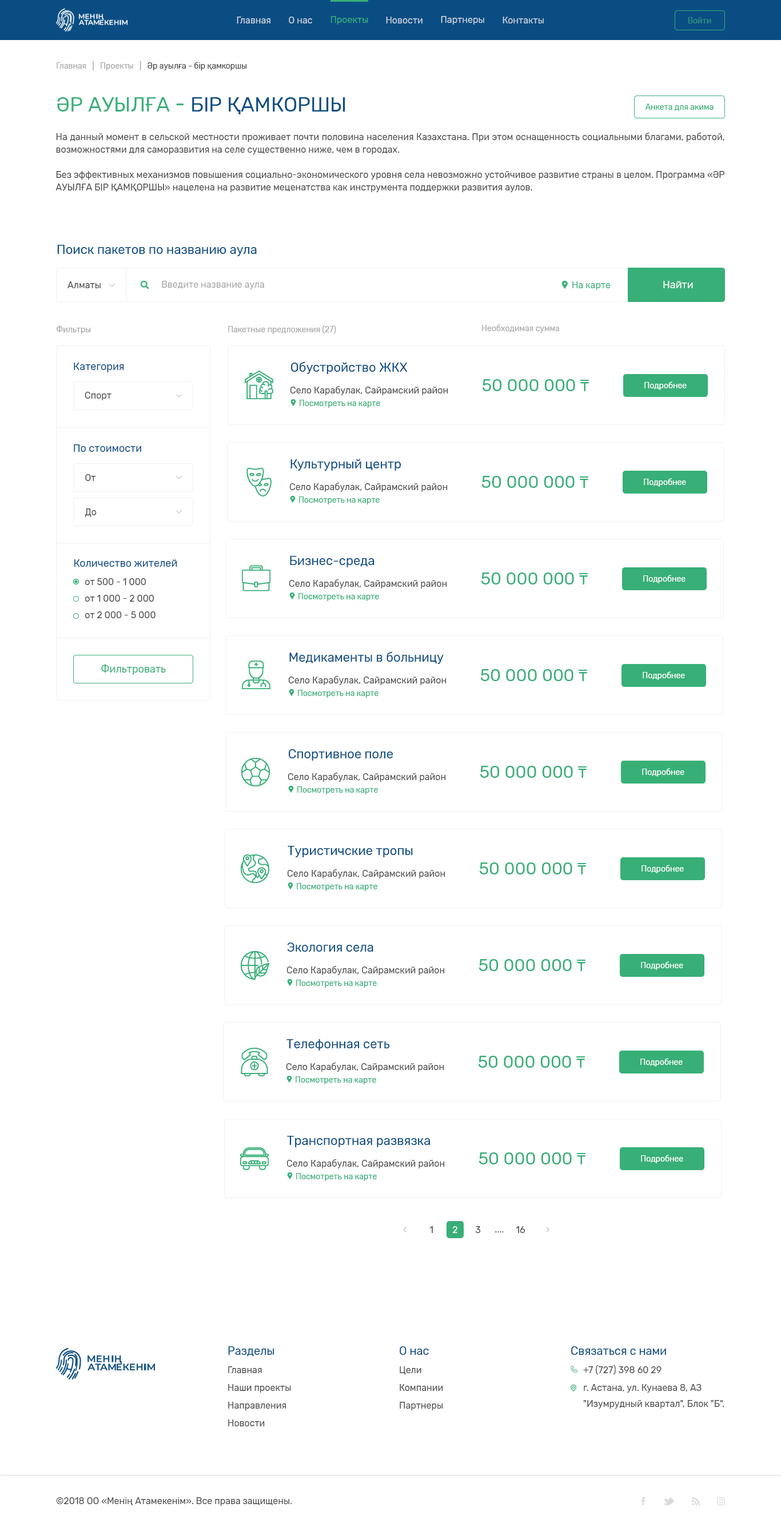
<style>
.page{position:relative;width:781px;height:1527px;background:#ffffff}
.page>*{position:absolute;margin:0}
.t1{font:9.1px "Rubik-Regular";color:#ccd4df}
.t2{font:9.1px "Rubik-Regular";color:#37af77}
.t3{font:8px "Rubik-Regular";color:#2c967b}
.t4{font:8px "Rubik-Regular";color:#a8a8a8}
.t5{font:8px "Rubik-Regular";color:#4a4a4a}
.t6{font:20.6px "Rubik-Regular";color:#0a4d83;text-transform:uppercase}
.t7{font:20.6px "Rubik-Regular";color:#37af77;text-transform:uppercase}
.t8{font:8px "Rubik-Regular";color:#37af77}
.t9{font:9.1px/12.6px "Rubik-Regular";color:#4a4a4a}
.t10{font:12.6px "Rubik-Regular";color:#0a4d83}
.t11{font:9.1px "Rubik-Regular";color:#4a4a4a}
.t12{font:9.1px "Rubik-Regular";color:#a8a8a8}
.t13{font:10.3px "Rubik-Regular";color:#fefefe}
.t14{font:10.3px "Rubik-Regular";color:#0a4d83}
.t15{font:17.2px "Rubik-Regular";color:#37af77}
.t16{font:8px "Rubik-Regular";color:#ffffff}
.t17{font:10.3px "Rubik-Regular";color:#37af77}
.t18{font:9.1px "Rubik-Regular";color:#ffffff}
.t19{font:11.4px "Rubik-Regular";color:#0a4d83}
.t20{font:9.1px/16px "Rubik-Regular";color:#4a4a4a}
</style>
<div class="page">
<p class="t1" style="left:237px;top:17px;width:33px;height:6px">Главная</p>
<p class="t1" style="left:289px;top:17px;width:23px;height:6px">О нас</p>
<p class="t2" style="left:330px;top:16px;width:38px;height:9px">Проекты</p>
<p class="t1" style="left:386px;top:17px;width:37px;height:6px">Новости</p>
<p class="t1" style="left:441px;top:16px;width:43px;height:9px">Партнеры</p>
<p class="t1" style="left:503px;top:17px;width:41px;height:6px">Контакты</p>
<p class="t3" style="left:688px;top:17px;width:23px;height:6px">Войти</p>
<p class="t4" style="left:57px;top:61px;width:190px;height:9px">Главная   |   Проекты   |   <span class="t5">Әр ауылға - бiр қамкоршы</span></p>
<p class="t6" style="left:57px;top:97px;width:288px;height:17px"><span class="t7">Әр ауылға - </span>бiр қамкоршы</p>
<p class="t8" style="left:645px;top:103px;width:69px;height:8px">Анкета для акима</p>
<p class="t9" style="left:55px;top:132px;width:669px;height:60px;text-align:justify">На данный момент в сельской местности проживает почти половина населения Казахстана. При этом оснащенность социальными благами, работой, возможностями для саморазвития на селе существенно ниже, чем в городах. <br><br>Без эффективных механизмов повышения социально-экономического уровня села невозможно устойчивое развитие страны в целом. Программа «ӘР АУЫЛҒА БІР ҚАМҚОРШЫ» нацелена на развитие меценатства как инструмента поддержки развития аулов.</p>
<p class="t10" style="left:57px;top:245px;width:200px;height:11px">Поиск пакетов по названию аула</p>
<p class="t11" style="left:67px;top:281px;width:34px;height:7px">Алматы</p>
<p class="t12" style="left:162px;top:281px;width:102px;height:8px">Введите название аула</p>
<p class="t2" style="left:572px;top:281px;width:39px;height:9px">На карте</p>
<p class="t13" style="left:663px;top:281px;width:30px;height:7px">Найти</p>
<p class="t4" style="left:57px;top:325px;width:34px;height:9px">Фильтры</p>
<p class="t4" style="left:228px;top:325px;width:108px;height:9px">Пакетные предложения (27)</p>
<p class="t4" style="left:482px;top:324px;width:77px;height:9px">Необходимая сумма</p>
<p class="t14" style="left:74px;top:363px;width:50px;height:9px">Категория</p>
<p class="t10" style="left:291px;top:361px;width:117px;height:13px">Обустройство ЖКХ</p>
<p class="t11" style="left:290px;top:385px;width:158px;height:10px">Село Карабулак, Сайрамский район</p>
<p class="t15" style="left:482px;top:379px;width:107px;height:12px">50 000 000 т</p>
<p class="t16" style="left:644px;top:381px;width:43px;height:9px">Подробнее</p>
<p class="t11" style="left:85px;top:392px;width:26px;height:8px">Спорт</p>
<p class="t8" style="left:300px;top:400px;width:80px;height:8px">Посмотреть на карте</p>
<p class="t14" style="left:74px;top:444px;width:67px;height:8px">По стоимости</p>
<p class="t10" style="left:290px;top:459px;width:111px;height:12px">Культурный центр</p>
<p class="t11" style="left:85px;top:474px;width:11px;height:7px">От</p>
<p class="t11" style="left:289px;top:482px;width:159px;height:10px">Село Карабулак, Сайрамский район</p>
<p class="t15" style="left:481px;top:476px;width:107px;height:12px">50 000 000 т</p>
<p class="t16" style="left:644px;top:478px;width:42px;height:9px">Подробнее</p>
<p class="t8" style="left:299px;top:496px;width:81px;height:8px">Посмотреть на карте</p>
<p class="t11" style="left:85px;top:508px;width:12px;height:9px">До</p>
<p class="t10" style="left:290px;top:556px;width:85px;height:11px">Бизнес-среда</p>
<p class="t14" style="left:74px;top:559px;width:103px;height:8px">Количество жителей</p>
<p class="t11" style="left:85px;top:578px;width:61px;height:7px">от 500 - 1 000</p>
<p class="t11" style="left:289px;top:579px;width:158px;height:9px">Село Карабулак, Сайрамский район</p>
<p class="t15" style="left:481px;top:572px;width:107px;height:12px">50 000 000 т</p>
<p class="t16" style="left:643px;top:575px;width:43px;height:8px">Подробнее</p>
<p class="t8" style="left:298px;top:593px;width:81px;height:8px">Посмотреть на карте</p>
<p class="t11" style="left:85px;top:595px;width:69px;height:7px">от 1 000 - 2 000</p>
<p class="t11" style="left:85px;top:611px;width:71px;height:7px">от 2 000 - 5 000</p>
<p class="t10" style="left:289px;top:651px;width:155px;height:13px">Медикаменты в больницу</p>
<p class="t17" style="left:101px;top:664px;width:65px;height:11px">Фильтровать</p>
<p class="t11" style="left:288px;top:675px;width:159px;height:10px">Село Карабулак, Сайрамский район</p>
<p class="t15" style="left:480px;top:669px;width:107px;height:12px">50 000 000 т</p>
<p class="t16" style="left:643px;top:671px;width:42px;height:9px">Подробнее</p>
<p class="t8" style="left:298px;top:690px;width:81px;height:8px">Посмотреть на карте</p>
<p class="t10" style="left:289px;top:749px;width:104px;height:11px">Спортивное поле</p>
<p class="t11" style="left:288px;top:772px;width:158px;height:10px">Село Карабулак, Сайрамский район</p>
<p class="t15" style="left:480px;top:766px;width:107px;height:12px">50 000 000 т</p>
<p class="t16" style="left:642px;top:768px;width:42px;height:8px">Подробнее</p>
<p class="t8" style="left:297px;top:786px;width:81px;height:8px">Посмотреть на карте</p>
<p class="t10" style="left:288px;top:846px;width:125px;height:11px">Туристичские тропы</p>
<p class="t11" style="left:287px;top:869px;width:158px;height:9px">Село Карабулак, Сайрамский район</p>
<p class="t15" style="left:479px;top:862px;width:107px;height:12px">50 000 000 т</p>
<p class="t16" style="left:642px;top:865px;width:42px;height:8px">Подробнее</p>
<p class="t8" style="left:297px;top:883px;width:80px;height:8px">Посмотреть на карте</p>
<p class="t10" style="left:287px;top:942px;width:86px;height:9px">Экология села</p>
<p class="t11" style="left:286px;top:965px;width:159px;height:10px">Село Карабулак, Сайрамский район</p>
<p class="t15" style="left:479px;top:959px;width:107px;height:12px">50 000 000 т</p>
<p class="t16" style="left:641px;top:961px;width:42px;height:9px">Подробнее</p>
<p class="t8" style="left:296px;top:979px;width:81px;height:8px">Посмотреть на карте</p>
<p class="t10" style="left:286px;top:1039px;width:104px;height:11px">Телефонная сеть</p>
<p class="t11" style="left:286px;top:1062px;width:158px;height:10px">Село Карабулак, Сайрамский район</p>
<p class="t15" style="left:478px;top:1056px;width:107px;height:12px">50 000 000 т</p>
<p class="t16" style="left:640px;top:1058px;width:43px;height:8px">Подробнее</p>
<p class="t8" style="left:296px;top:1076px;width:80px;height:8px">Посмотреть на карте</p>
<p class="t10" style="left:287px;top:1136px;width:143px;height:11px">Транспортная развязка</p>
<p class="t15" style="left:479px;top:1152px;width:107px;height:12px">50 000 000 т</p>
<p class="t16" style="left:641px;top:1154px;width:42px;height:9px">Подробнее</p>
<p class="t11" style="left:286px;top:1158px;width:159px;height:10px">Село Карабулак, Сайрамский район</p>
<p class="t8" style="left:296px;top:1173px;width:81px;height:8px">Посмотреть на карте</p>
<p class="t11" style="left:429px;top:1226px;width:4px;height:7px">1</p>
<p class="t18" style="left:452px;top:1226px;width:5px;height:7px">2</p>
<p class="t11" style="left:475px;top:1226px;width:6px;height:7px">3</p>
<p class="t11" style="left:516px;top:1226px;width:9px;height:7px">16</p>
<p class="t11" style="left:495px;top:1231px;width:9px;height:1px">....</p>
<p class="t19" style="left:228px;top:1346px;width:46px;height:10px">Разделы</p>
<p class="t19" style="left:400px;top:1346px;width:29px;height:9px">О нас</p>
<p class="t19" style="left:571px;top:1346px;width:95px;height:9px">Связаться с нами</p>
<p class="t11" style="left:228px;top:1366px;width:34px;height:7px">Главная</p>
<p class="t11" style="left:400px;top:1366px;width:21px;height:9px">Цели</p>
<p class="t11" style="left:583px;top:1365px;width:79px;height:9px">+7 (727) 398 60 29</p>
<p class="t11" style="left:228px;top:1384px;width:63px;height:8px">Наши проекты</p>
<p class="t11" style="left:400px;top:1384px;width:43px;height:7px">Компании</p>
<p class="t20" style="left:583px;top:1384px;width:141px;height:24px">г. Астана, ул. Кунаева 8, АЗ "Изумрудный квартал", Блок "Б".</p>
<p class="t11" style="left:228px;top:1401px;width:58px;height:9px">Направления</p>
<p class="t11" style="left:400px;top:1401px;width:43px;height:9px">Партнеры</p>
<p class="t11" style="left:228px;top:1419px;width:37px;height:7px">Новости</p>
<p class="t11" style="left:56px;top:1497px;width:236px;height:9px">©2018 ОО «Менің Атамекенім». Все права защищены.</p>
</div>
